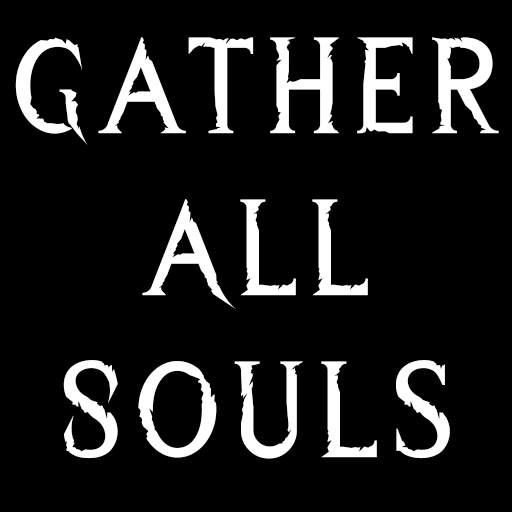
<style>
.page{position:relative;width:512px;height:512px;background:#000000}
.page>*{position:absolute;margin:0}
.t1{font:135px "WreckedShipRegular";letter-spacing:0.05em;color:#ffffff}
</style>
<div class="page">
<p class="t1" style="left:15px;top:36px;width:484px;height:423px;text-align:center">Gather<br>All<br>Souls</p>
</div>
